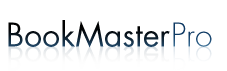
<style>
.page{position:relative;width:227px;height:71px;background:#ffffff}
.page>*{position:absolute;margin:0}
.t1{font:32px "FuturaStd-Book"}
.t2{font:32px "FuturaStd-Light";color:#0e3963}
</style>
<div class="page">
<p class="t1" style="left:8px;top:20px;width:162px;height:28px">BookMaster</p>
<p class="t2" style="left:173px;top:22px;width:39px;height:25px">Pro</p>
</div>
